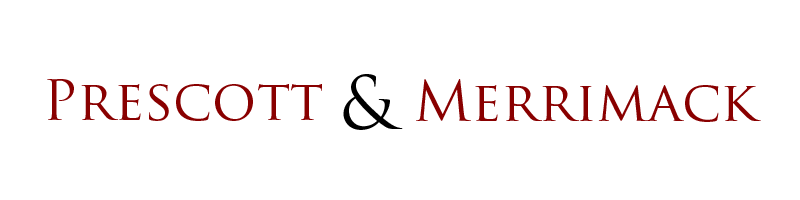
<style>
.page{position:relative;width:800px;height:200px;background:#ffffff}
.page>*{position:absolute;margin:0}
.t1{font:72px "TrajanPro-Regular";color:#000000}
.t2{font:55px "TrajanPro-Regular";color:#890000}
</style>
<div class="page">
<p class="t1" style="left:343px;top:74px;width:60px;height:56px">&amp;</p>
<p class="t2" style="left:47px;top:79px;width:275px;height:42px">Prescott</p>
<p class="t2" style="left:416px;top:79px;width:345px;height:43px">Merrimack</p>
</div>
